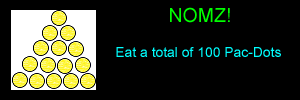
<style>
.page{position:relative;width:300px;height:100px;background:#000000}
.page>*{position:absolute;margin:0}
.t1{font:19.4px "ArialMT";color:#00ff00}
.t2{font:13.9px "ArialMT";color:#00ffff}
</style>
<div class="page">
<p class="t1" style="left:170px;top:7px;width:60px;height:16px">NOMZ!</p>
<p class="t2" style="left:116px;top:47px;width:165px;height:10px">Eat a total of 100 Pac-Dots</p>
</div>
